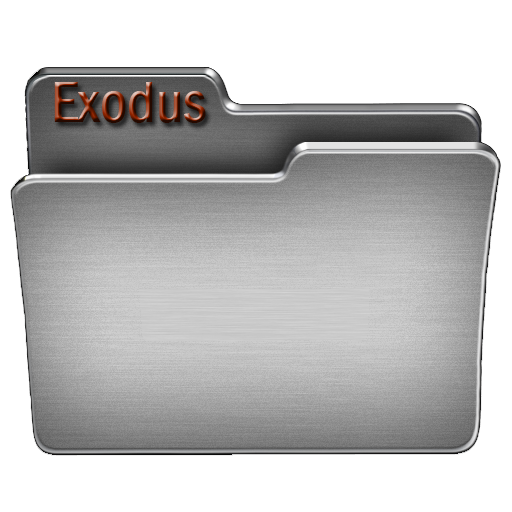
<style>
.page{position:relative;width:512px;height:512px;background:#ffffff}
.page>*{position:absolute;margin:0}
.t1{font:60px "FranklinGothic-MediumCond"}
</style>
<div class="page">
<p class="t1" style="left:54px;top:82px;width:152px;height:41px">Exodus</p>
</div>
